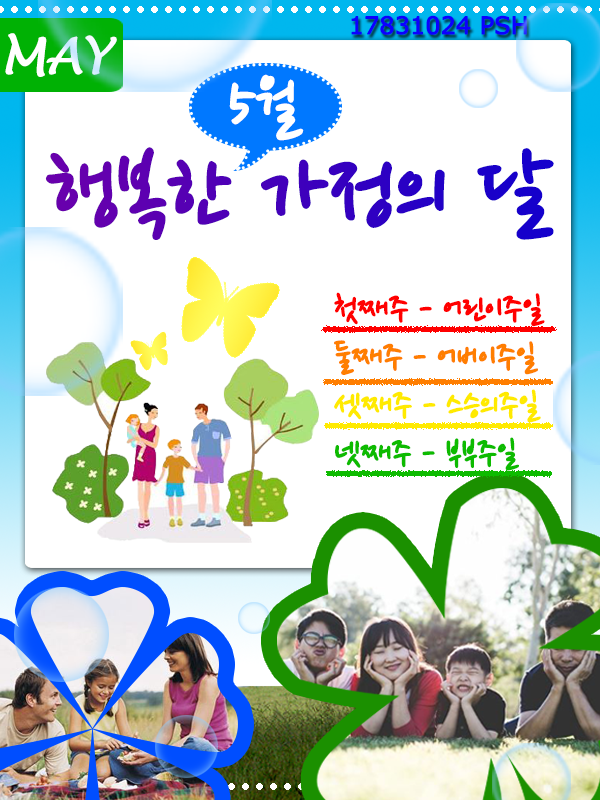
<style>
.page{position:relative;width:600px;height:800px;background:#ffffff}
.page>*{position:absolute;margin:0}
.t1{font:24px "MSReferenceSansSerif";letter-spacing:-0.025em;color:#0c00ff;text-transform:uppercase;font-weight:bold}
.t2{font:48px "LucidaHandwriting-Italic";letter-spacing:-0.025em;color:#ffffff;text-transform:uppercase;font-weight:bold}
.t3{font:72px "NanumPen";letter-spacing:-0.025em;color:#ffffff;text-transform:uppercase;font-weight:bold}
.t4{font:103px "NanumPen";letter-spacing:-0.025em;text-transform:uppercase;font-weight:bold}
.t5{font:36.6px/48.1px "NanumPen";letter-spacing:-0.025em;color:#ff0000;text-transform:uppercase;font-weight:bold}
.t6{font:36.6px/48.1px "NanumPen";letter-spacing:-0.025em;color:#ff7e00;text-transform:uppercase;font-weight:bold}
.t7{font:36.6px/48.1px "NanumPen";letter-spacing:-0.025em;color:#ffea00;text-transform:uppercase;font-weight:bold}
.t8{font:36.6px/48.1px "NanumPen";letter-spacing:-0.025em;color:#0dbb00;text-transform:uppercase;font-weight:bold}
</style>
<div class="page">
<p class="t1" style="left:351px;top:15px;width:176px;height:20px">17831024 PSH</p>
<p class="t2" style="left:5px;top:33px;width:112px;height:44px">MAY</p>
<p class="t3" style="left:229px;top:74px;width:75px;height:67px">5월</p>
<p class="t4" style="left:45px;top:147px;width:509px;height:93px">행복한 가정의 달</p>
<p class="t5" style="left:334px;top:292px;width:211px;height:179px">첫째주 - 어린이주일<br><span class="t6">둘째주 - 어버이주일<br></span><span class="t7">셋째주 - 스승의주일<br></span><span class="t8">넷째주 - 부부주일</span></p>
</div>
